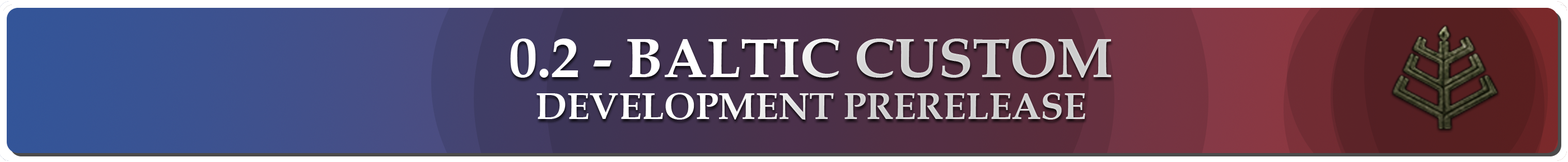
<style>
.page{position:relative;width:1568px;height:162px}
.page>*{position:absolute;margin:0}
.t1{font:37.3px/42px "BookAntiqua-Bold"}
.t2{font:56px "BookAntiqua-Bold"}
</style>
<div class="page">
<p class="t1" style="left:510px;top:39px;width:601px;height:81px;text-align:center"><span class="t2">0.2 - BALTIC CUSTOM<br></span>DEVELOPMENT PRERELEASE</p>
</div>
